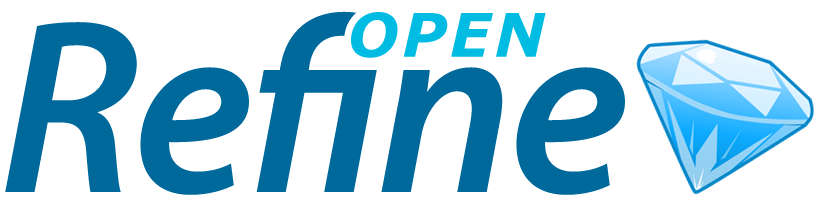
<style>
.page{position:relative;width:820px;height:200px;background:#ffffff}
.page>*{position:absolute;margin:0}
.t1{font:250px "MyriadPro-SemiboldIt";letter-spacing:-0.02em;color:#00699b}
.t2{font:60px "Verdana-BoldItalic";letter-spacing:0.06em;color:#00bce2}
</style>
<div class="page">
<p class="t1" style="left:5px;top:11px;width:620px;height:184px">Refine</p>
<p class="t2" style="left:351px;top:12px;width:195px;height:46px">OPEN</p>
</div>
